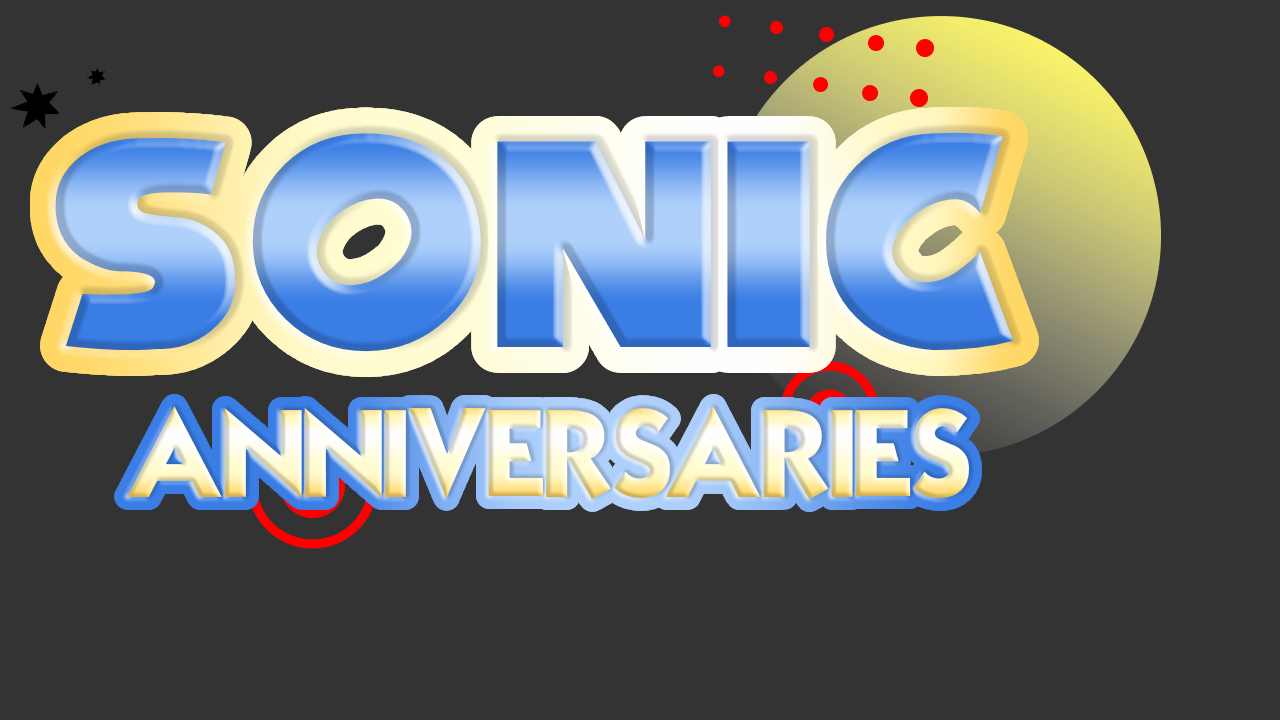
<style>
.page{position:relative;width:1280px;height:720px;background:#333333}
.page>*{position:absolute;margin:0}
.t1{font:263px "NiseSegaSonic"}
.t2{font:124px "Mouser"}
</style>
<div class="page">
<p class="t1" style="left:55px;top:131px;width:958px;height:222px">SONIC</p>
<p class="t1" style="left:55px;top:131px;width:958px;height:222px">SONIC</p>
<p class="t2" style="left:127px;top:406px;width:842px;height:94px">ANNIVERSARIES</p>
<p class="t2" style="left:127px;top:406px;width:842px;height:94px">ANNIVERSARIES</p>
</div>
